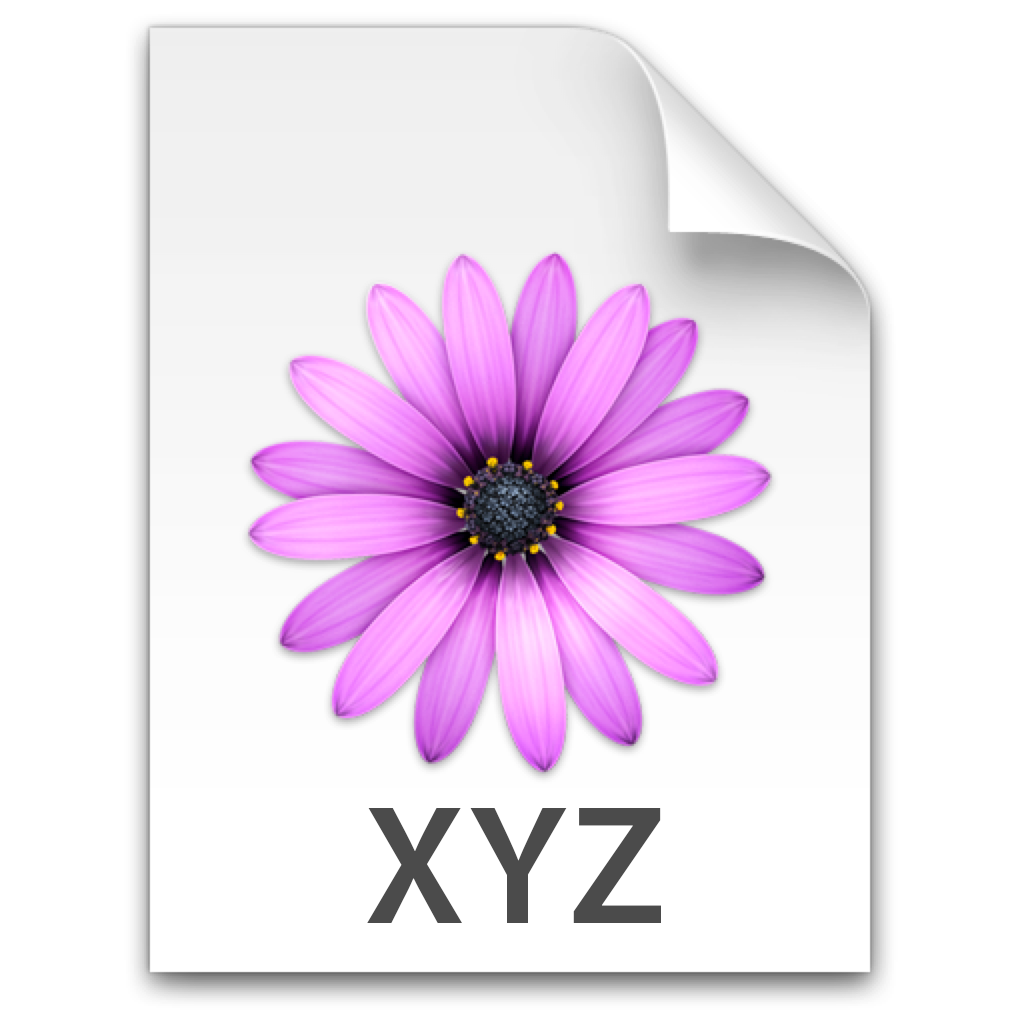
<style>
.page{position:relative;width:1024px;height:1024px;background:#ffffff}
.page>*{position:absolute;margin:0}
.t1{font:171px "MyriadPro-Semibold";letter-spacing:0.02em;color:#4b4b4b}
</style>
<div class="page">
<p class="t1" style="left:367px;top:808px;width:294px;height:115px">XYZ</p>
</div>
